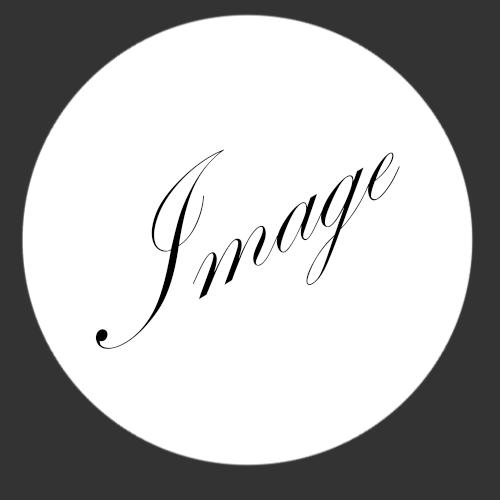
<style>
.page{position:relative;width:500px;height:500px;background:#ffffff}
.page>*{position:absolute;margin:0}
.t1{font:176.7px "KunstlerScript";color:#000000;font-style:italic}
</style>
<div class="page">
<p class="t1" style="left:95px;top:149px;width:305px;height:200px;rotate:-30deg">Image</p>
</div>
